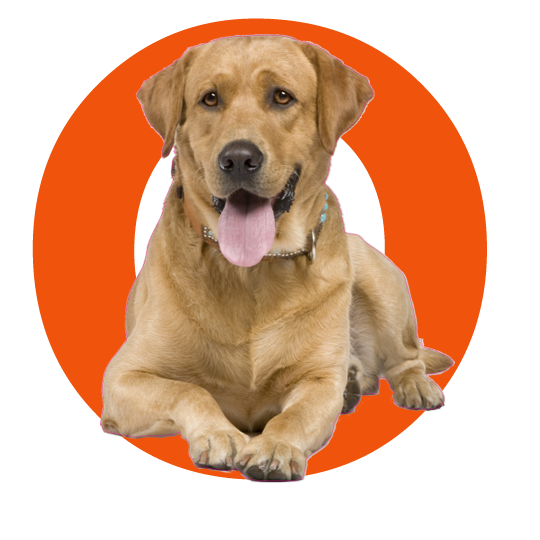
<style>
.page{position:relative;width:540px;height:540px;background:#ffffff}
.page>*{position:absolute;margin:0}
.t1{font:702.8px "TwCenMT-Bold"}
</style>
<div class="page">
<p class="t1" style="left:32px;top:18px;width:455px;height:462px">O</p>
</div>
